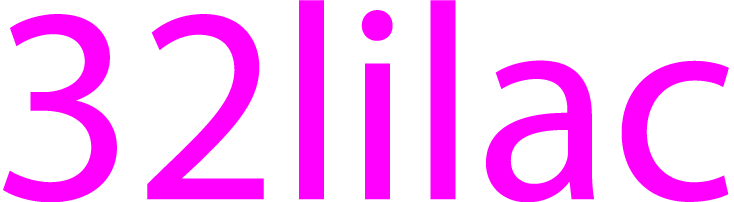
<style>
.page{position:relative;width:734px;height:202px;background:#ffffff}
.page>*{position:absolute;margin:0}
.t1{font:280px "MyriadPro-Regular";color:#ff00ff}
</style>
<div class="page">
<p class="t1" style="left:3px;top:0px;width:726px;height:203px">32lilac</p>
</div>
